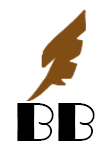
<style>
.page{position:relative;width:110px;height:150px;background:#ffffff}
.page>*{position:absolute;margin:0}
.t1{font:56.8px "Broadway";color:#000000}
</style>
<div class="page">
<p class="t1" style="left:17px;top:103px;width:78px;height:38px">BB</p>
</div>
